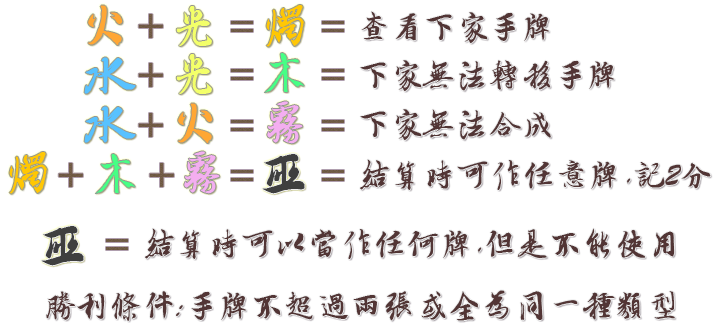
<style>
.page{position:relative;width:716px;height:333px;background:#ffffff}
.page>*{position:absolute;margin:0}
.t1{font:58.3px "SCFwxz";color:#ffa734}
.t2{font:46.1px "SCFwxz";color:#f3ff69}
.t3{font:51.2px "SCFwxz";color:#ffc704}
.t4{font:45.5px "SCFwxz";color:#715a45}
.t5{font:32.9px "SCFwxz";color:#523535}
.t6{font:37.6px "AdobeHeitiStd-Regular";color:#6f5b46}
.t7{font:46.5px "SCFwxz";color:#47ff84}
.t8{font:60.9px "SCFwxz";color:#58c2ff}
.t9{font:47.8px "SCFwxz";color:#f4aef0}
.t10{font:48.3px "SCFwxz";color:#3f3f3f}
</style>
<div class="page">
<p class="t1" style="left:88px;top:5px;width:35px;height:40px">火</p>
<p class="t2" style="left:176px;top:6px;width:36px;height:40px">光</p>
<p class="t3" style="left:266px;top:5px;width:38px;height:42px">烛</p>
<p class="t4" style="left:138px;top:14px;width:25px;height:24px">+</p>
<p class="t5" style="left:361px;top:11px;width:188px;height:33px">查看下家手牌</p>
<p class="t6" style="left:231px;top:21px;width:22px;height:11px">=</p>
<p class="t6" style="left:322px;top:21px;width:22px;height:11px">=</p>
<p class="t2" style="left:176px;top:54px;width:36px;height:40px">光</p>
<p class="t7" style="left:264px;top:53px;width:40px;height:40px">木</p>
<p class="t8" style="left:84px;top:57px;width:52px;height:37px">水</p>
<p class="t4" style="left:138px;top:63px;width:25px;height:24px">+</p>
<p class="t5" style="left:360px;top:60px;width:254px;height:32px">下家无法转移手牌</p>
<p class="t6" style="left:231px;top:69px;width:22px;height:11px">=</p>
<p class="t6" style="left:322px;top:69px;width:22px;height:11px">=</p>
<p class="t9" style="left:267px;top:101px;width:36px;height:43px">雾</p>
<p class="t8" style="left:84px;top:106px;width:52px;height:37px">水</p>
<p class="t4" style="left:138px;top:113px;width:25px;height:24px">+</p>
<p class="t1" style="left:178px;top:103px;width:35px;height:40px">火</p>
<p class="t5" style="left:360px;top:109px;width:191px;height:32px">下家无法合成</p>
<p class="t6" style="left:231px;top:120px;width:22px;height:11px">=</p>
<p class="t6" style="left:322px;top:120px;width:22px;height:11px">=</p>
<p class="t3" style="left:9px;top:152px;width:38px;height:42px">烛</p>
<p class="t7" style="left:95px;top:154px;width:40px;height:40px">木</p>
<p class="t9" style="left:184px;top:151px;width:36px;height:43px">雾</p>
<p class="t10" style="left:262px;top:154px;width:43px;height:40px">巫</p>
<p class="t5" style="left:360px;top:159px;width:351px;height:31px">结算时可作任意牌,记2分</p>
<p class="t4" style="left:58px;top:163px;width:25px;height:24px">+</p>
<p class="t4" style="left:149px;top:163px;width:25px;height:24px">+</p>
<p class="t6" style="left:231px;top:170px;width:22px;height:11px">=</p>
<p class="t6" style="left:322px;top:170px;width:22px;height:11px">=</p>
<p class="t10" style="left:41px;top:226px;width:43px;height:40px">巫</p>
<p class="t5" style="left:145px;top:228px;width:530px;height:31px">结算时可以当作任何牌,但是不能使用</p>
<p class="t6" style="left:106px;top:239px;width:22px;height:11px">=</p>
<p class="t5" style="left:46px;top:291px;width:137px;height:30px">胜利条件:</p>
<p class="t5" style="left:191px;top:290px;width:484px;height:31px">手牌不超过两张或全为同一种类型</p>
</div>
